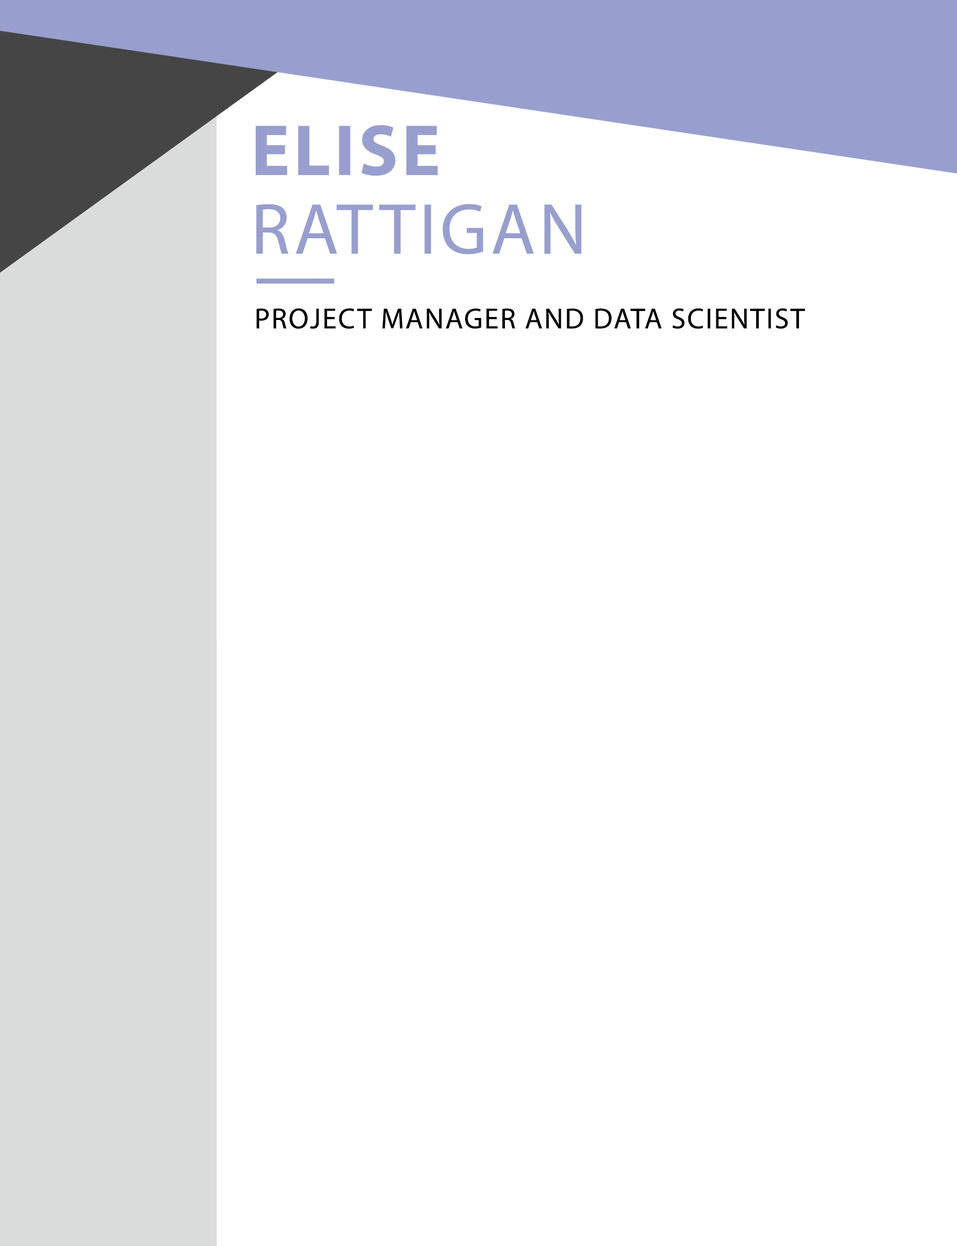
<style>
.page{position:relative;width:957px;height:1246px;background:#ffffff}
.page>*{position:absolute;margin:0}
.t1{font:72.7px "MyriadPro-Bold";letter-spacing:0.05em;color:#989fce;text-transform:uppercase}
.t2{font:72.7px "MyriadPro-Regular";letter-spacing:0.05em;color:#989fce;text-transform:uppercase}
.t3{font:29.1px "MyriadPro-Regular";letter-spacing:0.05em;color:#000000;text-transform:uppercase}
</style>
<div class="page">
<p class="t1" style="left:256px;top:125px;width:182px;height:51px">Elise</p>
<p class="t2" style="left:256px;top:204px;width:326px;height:50px">Rattigan</p>
<p class="t3" style="left:256px;top:308px;width:549px;height:21px">Project manager and data scientist</p>
</div>
